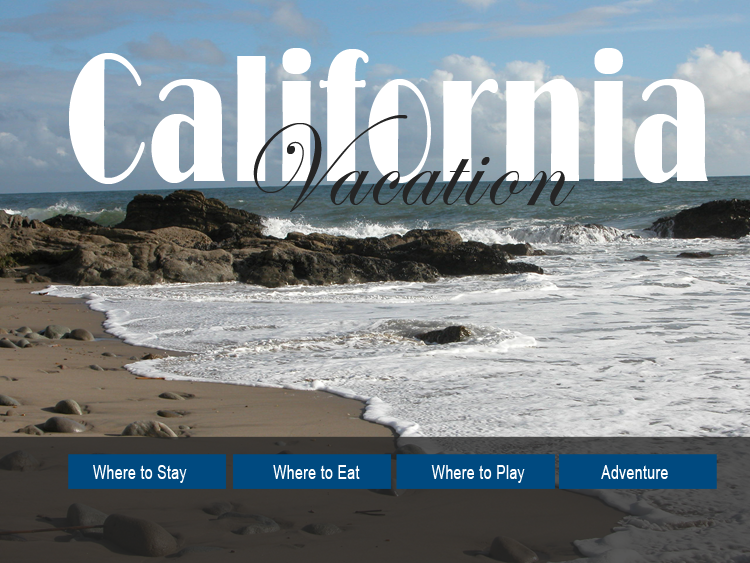
<style>
.page{position:relative;width:750px;height:563px}
.page>*{position:absolute;margin:0}
.t1{font:186.5px "Broadway";letter-spacing:0.03em;color:#ffffff;scale:0.6 1}
.t2{font:125.1px "EdwardianScriptITC";letter-spacing:0.03em;color:#252525;scale:0.9 1}
.t3{font:18.7px "ArialMT";letter-spacing:0.03em;color:#ffffff;scale:0.75 1}
</style>
<div class="page">
<p class="t1" style="left:69px;top:48px;width:639px;height:136px">California</p>
<p class="t2" style="left:253px;top:115px;width:322px;height:97px">Vacation</p>
<p class="t3" style="left:93px;top:465px;width:94px;height:18px">Where to Stay</p>
<p class="t3" style="left:273px;top:465px;width:87px;height:14px">Where to Eat</p>
<p class="t3" style="left:431px;top:465px;width:94px;height:18px">Where to Play</p>
<p class="t3" style="left:601px;top:465px;width:67px;height:14px">Adventure</p>
</div>
